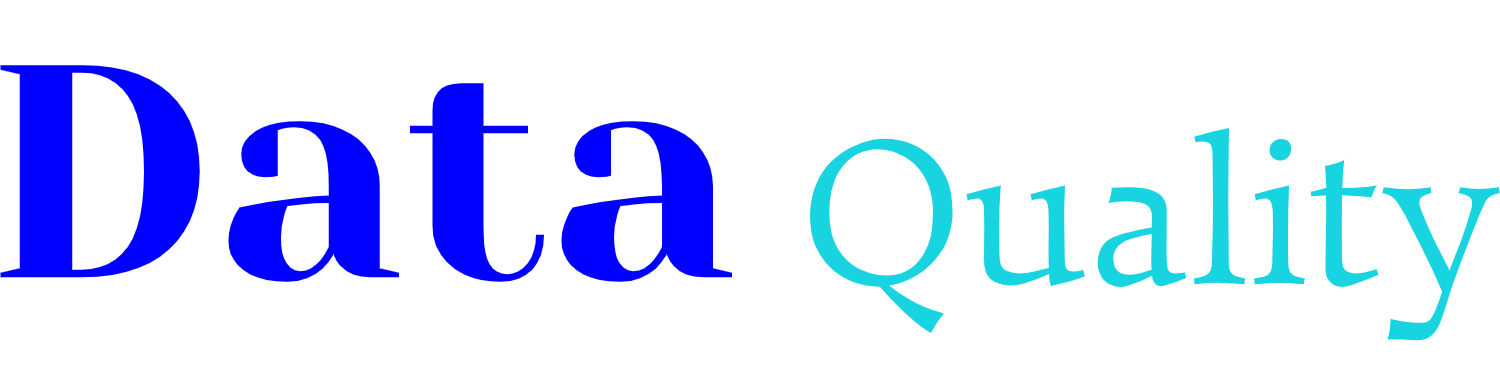
<style>
.page{position:relative;width:1500px;height:380px;background:#ffffff}
.page>*{position:absolute;margin:0}
.t1{font:302.9px "YesevaOne-Regular";color:#0000ff;scale:1.05 1}
.t2{font:221.1px "Walleye";color:#18d3e0}
</style>
<div class="page">
<p class="t1" style="left:0px;top:65px;width:732px;height:217px">Data</p>
<p class="t2" style="left:810px;top:128px;width:690px;height:214px">Quality</p>
</div>
